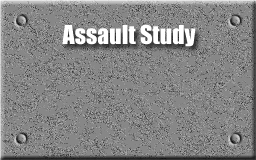
<style>
.page{position:relative;width:256px;height:160px;background:#878787}
.page>*{position:absolute;margin:0}
.t1{font:24px "Impact";color:#ffffff}
</style>
<div class="page">
<p class="t1" style="left:62px;top:24px;width:134px;height:23px">Assault Study</p>
</div>
